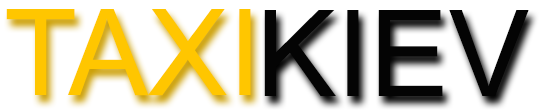
<style>
.page{position:relative;width:540px;height:110px;background:#ffffff}
.page>*{position:absolute;margin:0}
.t1{font:120px "ArialMT";color:#ffc600}
.t2{font:120px "ArialMT";color:#040404}
</style>
<div class="page">
<p class="t1" style="left:6px;top:9px;width:245px;height:87px">TAXI</p>
<p class="t2" style="left:264px;top:10px;width:265px;height:86px">KIEV</p>
</div>
